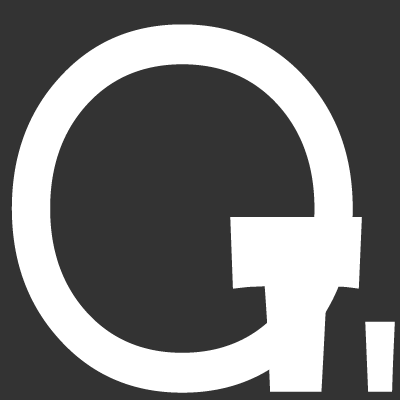
<style>
.page{position:relative;width:400px;height:400px;background:#333333}
.page>*{position:absolute;margin:0}
.t1{font:542.8px "Questrial-Regular";color:#ffffff;scale:0.93 1}
.t2{font:232.6px "ShowcardGothic-Reg";color:#ffffff;scale:0.93 1}
.t3{font:93.1px "ShowcardGothic-Reg";color:#ffffff;scale:0.93 1}
</style>
<div class="page">
<p class="t1" style="left:11px;top:24px;width:342px;height:369px">O</p>
<p class="t2" style="left:230px;top:217px;width:165px;height:175px">t<span class="t3">i</span></p>
</div>
